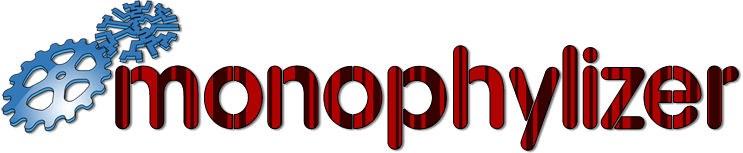
<style>
.page{position:relative;width:743px;height:153px;background:#ffffff}
.page>*{position:absolute;margin:0}
.t1{font:110.3px "AGStencil";letter-spacing:-0.02em;font-weight:bold;scale:0.92 1}
</style>
<div class="page">
<p class="t1" style="left:115px;top:45px;width:624px;height:106px">Monophylizer</p>
</div>
